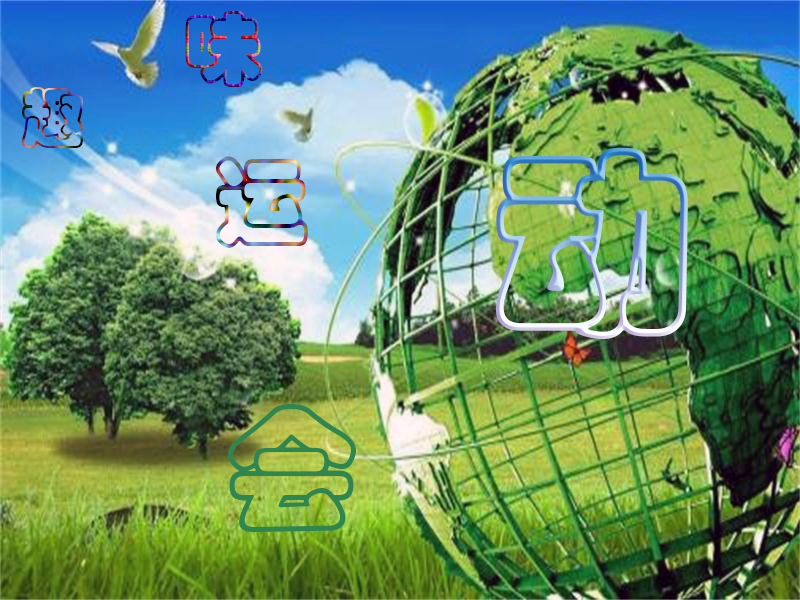
<style>
.page{position:relative;width:800px;height:600px}
.page>*{position:absolute;margin:0}
.t1{font:80px "STCaiyun"}
.t2{font:64px "STCaiyun"}
.t3{font:200px "STCaiyun"}
.t4{font:96px "STCaiyun"}
.t5{font:133.3px "STCaiyun";color:#308651}
</style>
<div class="page">
<p class="t1" style="left:185px;top:11px;width:78px;height:76px">味</p>
<p class="t2" style="left:21px;top:87px;width:63px;height:61px">趣</p>
<p class="t3" style="left:496px;top:147px;width:192px;height:192px">动</p>
<p class="t4" style="left:216px;top:156px;width:92px;height:92px">运</p>
<p class="t5" style="left:228px;top:404px;width:129px;height:128px">会</p>
</div>
